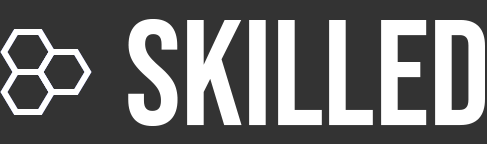
<style>
.page{position:relative;width:487px;height:144px;background:#333333}
.page>*{position:absolute;margin:0}
.t1{font:150px "BebasNeue-Regular";color:#ffffff;text-transform:uppercase}
</style>
<div class="page">
<p class="t1" style="left:128px;top:19px;width:357px;height:107px">SkillED</p>
</div>
